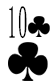
<style>
.page{position:relative;width:55px;height:83px;background:#ffffff}
.page>*{position:absolute;margin:0}
.t1{font:42px "DFKaiShu-SB-Estd-BF";color:#000000;scale:0.5 1}
</style>
<div class="page">
<p class="t1" style="left:9px;top:6px;width:18px;height:33px">10</p>
</div>
